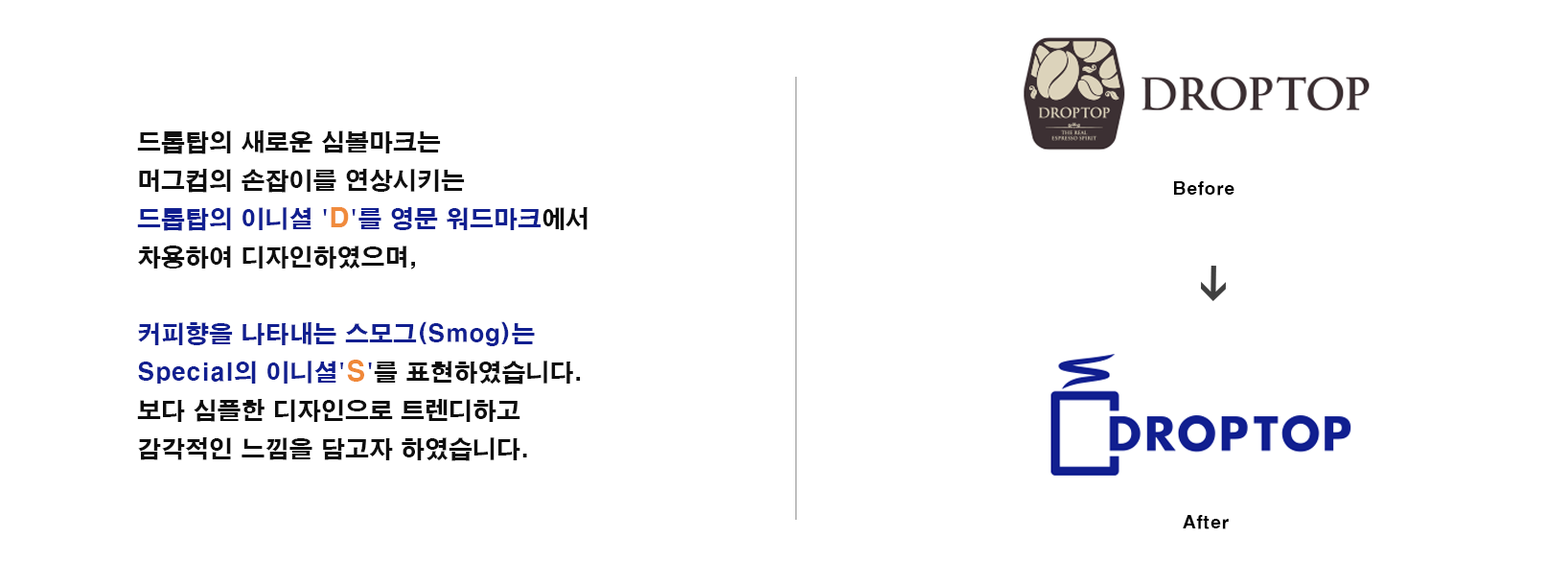
<style>
.page{position:relative;width:1568px;height:561px;background:#ffffff}
.page>*{position:absolute;margin:0}
.t1{font:24px/38.3px "HYgtrE";color:#0e0e0e}
.t2{font:24px/38.3px "HYgtrE";color:#0f0f0f}
.t3{font:24px/38.3px "HYgtrE";color:#111f90}
.t4{font:26.8px/38.3px "HYgtrE";color:#f08b3d}
.t5{font:26.8px/38.3px "HYgtrE";color:#f08838}
.t6{font:17.3px "HYgtrE";color:#000000}
</style>
<div class="page">
<p class="t1" style="left:137px;top:130px;width:451px;height:331px"><span class="t2">드롭탑의 새로운 심볼마크는 <br>머그컵의 손잡이를 연상시키는 <br></span><span class="t3">드롭탑의 이니셜 '</span><span class="t4">D</span><span class="t3">'를 영문 워드마크</span>에서<br>차용하여 디자인하였으며,<br><br><span class="t3">커피향을 나타내는 스모그(Smog)는<br>Special의 이니셜'</span><span class="t5">S</span><span class="t3">'</span>를 표현하였습니다.<br>보다 심플한 디자인으로 트렌디하고 <br>감각적인 느낌을 담고자 하였습니다.</p>
<p class="t6" style="left:1174px;top:181px;width:60px;height:15px">Before</p>
<p class="t6" style="left:1183px;top:515px;width:46px;height:14px">After</p>
</div>
